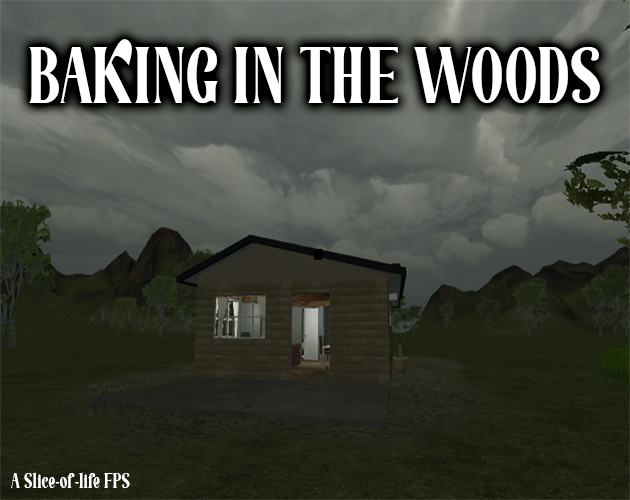
<style>
.page{position:relative;width:630px;height:500px}
.page>*{position:absolute;margin:0}
.t1{font:80px "LaLemonti";color:#ffffff;scale:0.7 1}
.t2{font:21.6px "LaLemonti";color:#ffffff;scale:0.7 1}
</style>
<div class="page">
<p class="t1" style="left:29px;top:39px;width:571px;height:64px">BAKING IN THE WOODS</p>
<p class="t2" style="left:11px;top:472px;width:119px;height:16px">A Slice-of-life FPS</p>
</div>
